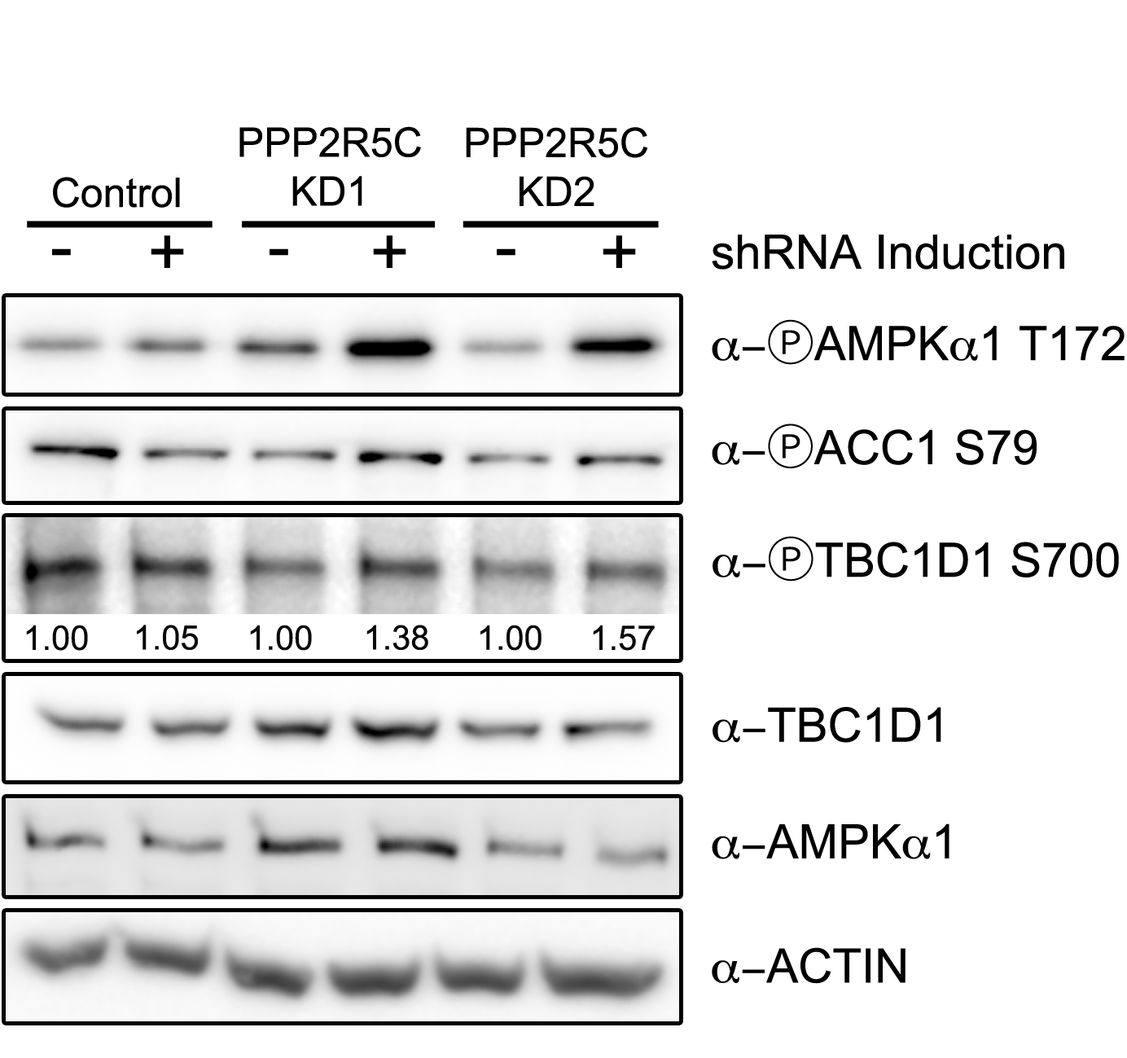
<style>
.page{position:relative;width:1127px;height:1058px;background:#ffffff}
.page>*{position:absolute;margin:0}
.t1{font:40.7px "ArialMT";color:#000000}
.t2{font:67.9px "ArialMT";color:#000000}
.t3{font:47.5px "ArialMT";color:#000000}
.t4{font:47.5px "Symbol";color:#000000}
.t5{font:47.5px "KozGoPr6N-Regular";color:#000000}
</style>
<div class="page">
<p class="t1" style="left:239px;top:126px;width:182px;height:80px;text-align:center">PPP2R5C<br>KD1</p>
<p class="t1" style="left:466px;top:127px;width:181px;height:79px;text-align:center">PPP2R5C<br>KD2</p>
<p class="t1" style="left:53px;top:177px;width:127px;height:31px">Control</p>
<p class="t2" style="left:151px;top:235px;width:33px;height:33px">+</p>
<p class="t2" style="left:373px;top:235px;width:33px;height:33px">+</p>
<p class="t2" style="left:603px;top:235px;width:33px;height:33px">+</p>
<p class="t3" style="left:712px;top:235px;width:352px;height:35px">shRNA Induction</p>
<p class="t2" style="left:52px;top:248px;width:19px;height:8px">-</p>
<p class="t2" style="left:270px;top:248px;width:18px;height:8px">-</p>
<p class="t2" style="left:497px;top:248px;width:19px;height:8px">-</p>
<p class="t3" style="left:712px;top:319px;width:413px;height:46px"><span class="t4">a-</span><span class="t5">Ⓟ</span>AMPK<span class="t4">a</span>1 T172</p>
<p class="t3" style="left:712px;top:423px;width:325px;height:45px"><span class="t4">a-</span><span class="t5">Ⓟ</span>ACC1 S79</p>
<p class="t3" style="left:713px;top:536px;width:406px;height:45px"><span class="t4">a-</span><span class="t5">Ⓟ</span>TBC1D1 S700</p>
<p class="t3" style="left:713px;top:707px;width:228px;height:36px"><span class="t4">a-</span>TBC1D1</p>
<p class="t3" style="left:712px;top:823px;width:238px;height:36px"><span class="t4">a-</span>AMPK<span class="t4">a</span>1</p>
<p class="t3" style="left:712px;top:947px;width:194px;height:37px"><span class="t4">a-</span>ACTIN</p>
</div>
